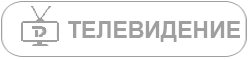
<style>
.page{position:relative;width:250px;height:60px;background:#ffffff}
.page>*{position:absolute;margin:0}
.t1{font:23px "Arial-BoldMT";color:#9f9f9f}
</style>
<div class="page">
<p class="t1" style="left:68px;top:21px;width:172px;height:21px">ТЕЛЕВИДЕНИЕ</p>
</div>
